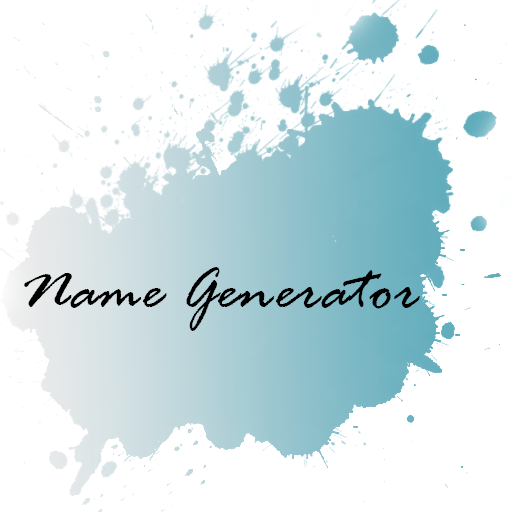
<style>
.page{position:relative;width:512px;height:512px;background:#ffffff}
.page>*{position:absolute;margin:0}
.t1{font:66.7px "RageItalic";letter-spacing:0.01em;color:#000000}
</style>
<div class="page">
<p class="t1" style="left:24px;top:267px;width:396px;height:64px">Name Generator</p>
</div>
